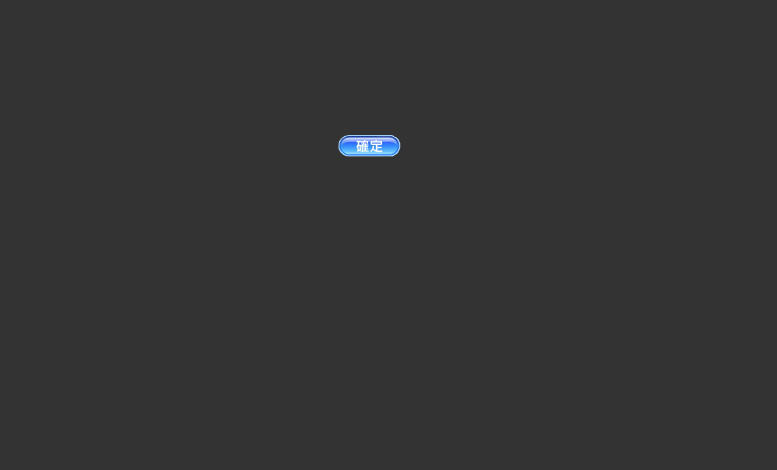
<style>
.page{position:relative;width:777px;height:470px;background:#333333}
.page>*{position:absolute;margin:0}
.t1{font:13px "DFLiHei-Md-WIN-BF";letter-spacing:0.05em;color:#ffffff;text-transform:uppercase}
</style>
<div class="page">
<p class="t1" style="left:356px;top:140px;width:27px;height:13px">確定</p>
</div>
